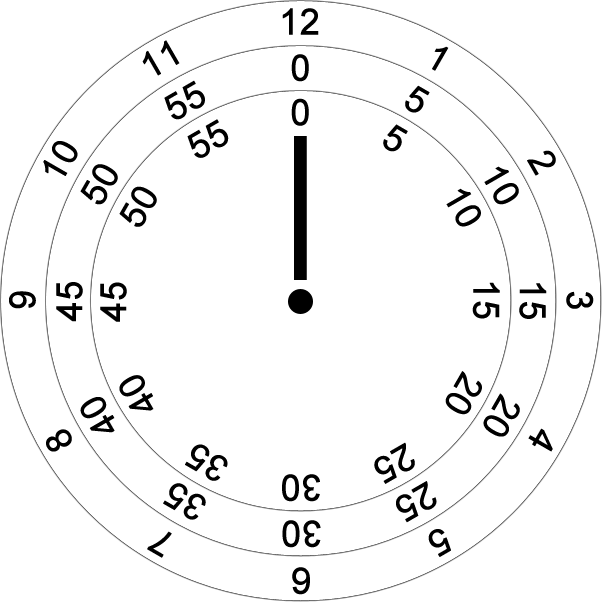
<style>
.page{position:relative;width:602px;height:602px;background:#ffffff}
.page>*{position:absolute;margin:0}
.t1{font:36px "ArialMT";color:#000000;font-weight:bold}
</style>
<div class="page">
<p class="t1" style="left:282px;top:8px;width:37px;height:27px">12</p>
<p class="t1" style="left:142px;top:40px;width:38px;height:36px;rotate:-30deg">11</p>
<p class="t1" style="left:291px;top:54px;width:18px;height:28px">0</p>
<p class="t1" style="left:432px;top:46px;width:17px;height:25px;rotate:30deg">1</p>
<p class="t1" style="left:164px;top:80px;width:41px;height:40px;rotate:-30deg">55</p>
<p class="t1" style="left:405px;top:85px;width:25px;height:28px;rotate:30deg">5</p>
<p class="t1" style="left:291px;top:98px;width:18px;height:28px">0</p>
<p class="t1" style="left:187px;top:119px;width:42px;height:39px;rotate:-30deg">55</p>
<p class="t1" style="left:383px;top:124px;width:25px;height:28px;rotate:30deg">5</p>
<p class="t1" style="left:43px;top:141px;width:35px;height:35px;rotate:-60deg">10</p>
<p class="t1" style="left:527px;top:150px;width:29px;height:26px;rotate:60deg">2</p>
<p class="t1" style="left:80px;top:164px;width:38px;height:41px;rotate:-60deg">50</p>
<p class="t1" style="left:484px;top:166px;width:35px;height:39px;rotate:60deg">10</p>
<p class="t1" style="left:119px;top:186px;width:38px;height:41px;rotate:-60deg">50</p>
<p class="t1" style="left:446px;top:188px;width:35px;height:39px;rotate:60deg">10</p>
<p class="t1" style="left:9px;top:291px;width:27px;height:18px;rotate:-90deg">9</p>
<p class="t1" style="left:56px;top:282px;width:27px;height:40px;rotate:-90deg">45</p>
<p class="t1" style="left:100px;top:282px;width:27px;height:40px;rotate:-90deg">45</p>
<p class="t1" style="left:472px;top:282px;width:28px;height:37px;rotate:90deg">15</p>
<p class="t1" style="left:519px;top:283px;width:28px;height:36px;rotate:90deg">15</p>
<p class="t1" style="left:566px;top:291px;width:28px;height:18px;rotate:90deg">3</p>
<p class="t1" style="left:119px;top:375px;width:35px;height:36px;rotate:-120deg">40</p>
<p class="t1" style="left:445px;top:371px;width:37px;height:44px;rotate:120deg">20</p>
<p class="t1" style="left:80px;top:397px;width:35px;height:36px;rotate:-120deg">40</p>
<p class="t1" style="left:483px;top:393px;width:37px;height:44px;rotate:120deg">20</p>
<p class="t1" style="left:46px;top:429px;width:26px;height:23px;rotate:-120deg">8</p>
<p class="t1" style="left:528px;top:428px;width:25px;height:24px;rotate:120deg">4</p>
<p class="t1" style="left:185px;top:444px;width:43px;height:37px;rotate:-150deg">35</p>
<p class="t1" style="left:374px;top:442px;width:41px;height:42px;rotate:150deg">25</p>
<p class="t1" style="left:163px;top:483px;width:43px;height:37px;rotate:-150deg">35</p>
<p class="t1" style="left:282px;top:474px;width:38px;height:28px;rotate:-180deg">30</p>
<p class="t1" style="left:396px;top:481px;width:41px;height:42px;rotate:150deg">25</p>
<p class="t1" style="left:282px;top:520px;width:39px;height:28px;rotate:-180deg">30</p>
<p class="t1" style="left:147px;top:531px;width:25px;height:27px;rotate:-150deg">7</p>
<p class="t1" style="left:428px;top:529px;width:23px;height:28px;rotate:150deg">5</p>
<p class="t1" style="left:292px;top:567px;width:18px;height:28px;rotate:-180deg">6</p>
</div>
